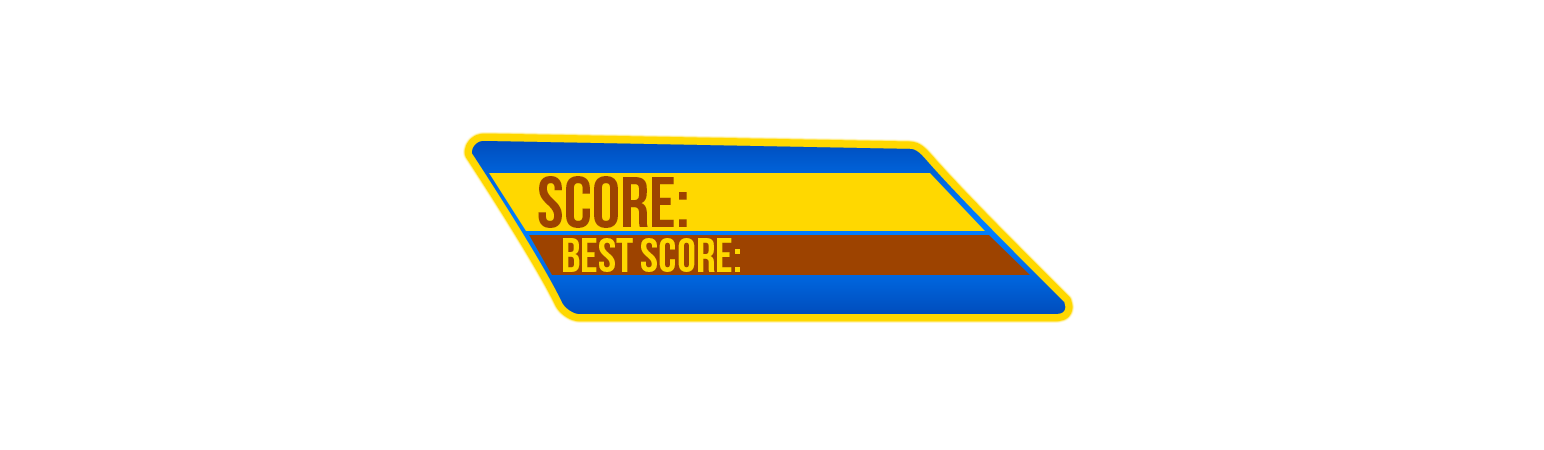
<style>
.page{position:relative;width:1544px;height:450px;background:#ffffff}
.page>*{position:absolute;margin:0}
.t1{font:72px "BebasNeue";color:#9d4300;text-transform:uppercase}
.t2{font:48px "BebasNeue";color:#ffd800;text-transform:uppercase}
</style>
<div class="page">
<p class="t1" style="left:538px;top:176px;width:149px;height:52px">SCORE:</p>
<p class="t2" style="left:563px;top:238px;width:177px;height:34px">BEST SCORE:</p>
</div>
